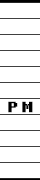
<style>
.page{position:relative;width:40px;height:180px;background:#ffffff}
.page>*{position:absolute;margin:0}
.t1{font:16px/16px "FixedsysExcelsiorIIIb";color:#ffffff}
.t2{font:18px "FixedsysExcelsiorIIIb";letter-spacing:0.12em;color:#000000;font-weight:bold;scale:1.2 1}
</style>
<div class="page">
<p class="t1" style="left:0px;top:2px;width:40px;height:177px">█████<br>█████<br>█████<br>█████<br>█████<br>█████<br>█████<br>█████<br>█████<br>█████<br>█████</p>
<p class="t2" style="left:8px;top:101px;width:25px;height:12px">PM</p>
</div>
